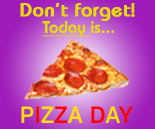
<style>
.page{position:relative;width:155px;height:129px}
.page>*{position:absolute;margin:0}
.t1{font:18.9px "Bauhaus-Bold";color:#e6d90e;font-weight:bold}
.t2{font:16.9px "BauhausLT-Demi";color:#e5d90d;text-decoration:underline}
.t3{font:16.9px "BauhausLT-Demi";color:#e5d90d}
.t4{font:23.9px "CriqueGrotesk-Medium";color:#ffde00}
.t5{font:23.9px "CriqueGrotesk-Medium";color:#ff0000}
</style>
<div class="page">
<p class="t1" style="left:20px;top:3px;width:115px;height:18px">Don’t forget!</p>
<p class="t2" style="left:42px;top:21px;width:72px;height:16px">Today <span class="t3">is...</span></p>
<p class="t4" style="left:21px;top:106px;width:112px;height:17px">P<span class="t5">I</span>Z<span class="t5">Z</span>A <span class="t5">D</span>A<span class="t5">Y</span></p>
</div>
